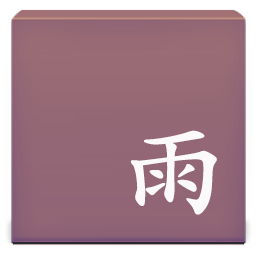
<style>
.page{position:relative;width:256px;height:256px}
.page>*{position:absolute;margin:0}
.t1{font:110px "STKaiTi-TC-Bold";color:#fbf9f9}
</style>
<div class="page">
<p class="t1" style="left:130px;top:130px;width:87px;height:85px">雨</p>
</div>
